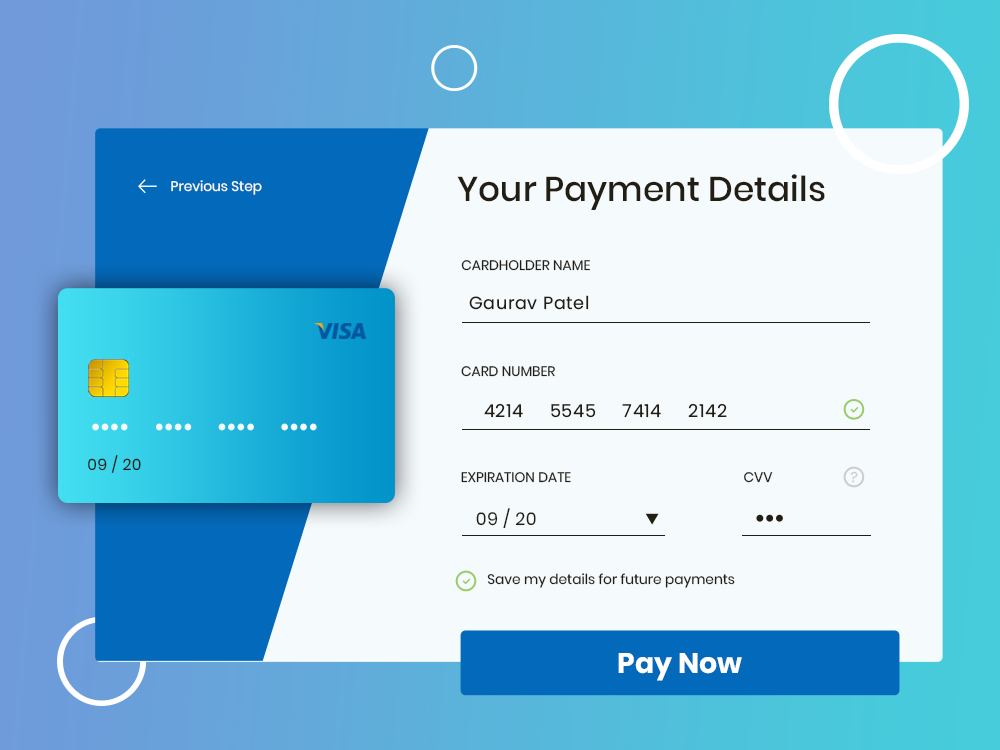
<style>
.page{position:relative;width:1000px;height:750px;background:#f5fafd}
.page>*{position:absolute;margin:0}
.t1{font:34.3px "Poppins-Medium";color:#221e13}
.t2{font:13.7px "Poppins-Regular";color:#ffffff}
.t3{font:13.7px "Poppins-Regular";color:#221e13}
.t4{font:17.7px "Poppins-Regular";letter-spacing:0.03em;color:#221e13}
.t5{font:15.7px "Poppins-Regular";letter-spacing:0.03em;color:#221e13}
.t6{font:13.7px "Poppins-Regular";letter-spacing:0.03em;color:#cccccc}
.t7{font:28.4px "Poppins-Bold";color:#ffffff}
</style>
<div class="page">
<p class="t1" style="left:457px;top:174px;width:368px;height:36px">Your Payment Details</p>
<p class="t2" style="left:171px;top:180px;width:91px;height:15px">Previous Step</p>
<p class="t3" style="left:461px;top:260px;width:129px;height:11px">CARDHOLDER NAME</p>
<p class="t4" style="left:469px;top:295px;width:120px;height:15px">Gaurav Patel</p>
<p class="t3" style="left:461px;top:366px;width:94px;height:11px">CARD NUMBER</p>
<p class="t4" style="left:484px;top:403px;width:243px;height:15px">4214     5545     7414     2142</p>
<p class="t5" style="left:88px;top:455px;width:53px;height:18px">09 / 20</p>
<p class="t3" style="left:461px;top:472px;width:110px;height:11px">EXPIRATION DATE</p>
<p class="t3" style="left:744px;top:472px;width:29px;height:11px">CVV</p>
<p class="t6" style="left:850px;top:471px;width:8px;height:12px">?</p>
<p class="t4" style="left:476px;top:508px;width:60px;height:21px">09 / 20</p>
<p class="t3" style="left:487px;top:573px;width:248px;height:15px">Save my details for future payments</p>
<p class="t7" style="left:618px;top:653px;width:124px;height:28px">Pay Now</p>
</div>
